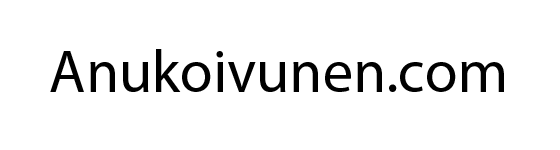
<style>
.page{position:relative;width:560px;height:150px;background:#ffffff}
.page>*{position:absolute;margin:0}
.t1{font:60px "MyriadPro-Regular";color:#000000}
</style>
<div class="page">
<p class="t1" style="left:50px;top:49px;width:454px;height:43px">Anukoivunen.com</p>
</div>
